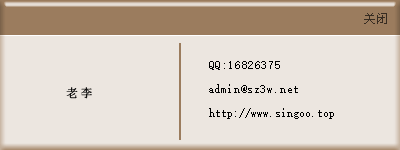
<style>
.page{position:relative;width:400px;height:150px;background:#ece6e0}
.page>*{position:absolute;margin:0}
.t1{font:12px "SimSun";letter-spacing:0.05em;color:#000000}
.t2{font:12px "SimSun";letter-spacing:0.2em;color:#000000}
.t3{font:12px "SimSun";color:#000000}
</style>
<div class="page">
<p class="t1" style="left:209px;top:61px;width:71px;height:9px">QQ:16826375</p>
<p class="t2" style="left:66px;top:87px;width:26px;height:12px">老李</p>
<p class="t1" style="left:209px;top:84px;width:89px;height:9px">admin@sz3w.net</p>
<p class="t3" style="left:209px;top:108px;width:125px;height:11px">http://www.singoo.top</p>
</div>
